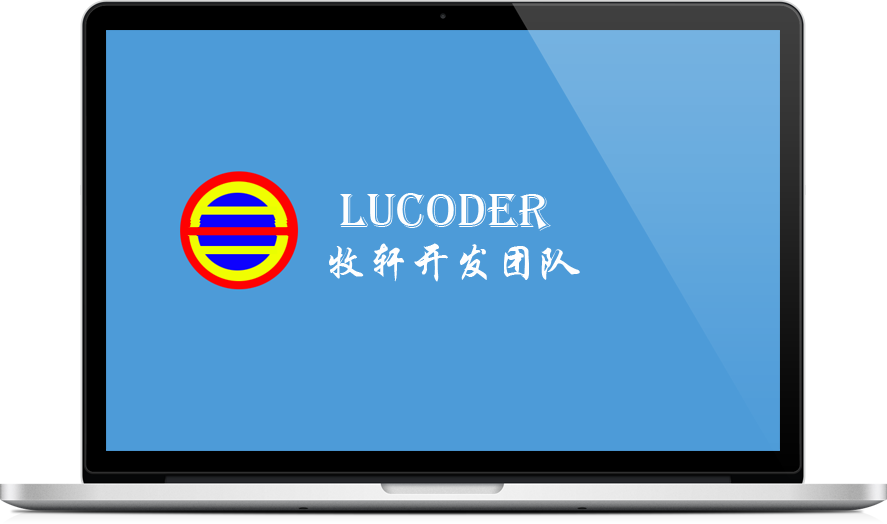
<style>
.page{position:relative;width:887px;height:524px;background:#4d9bd8}
.page>*{position:absolute;margin:0}
.t1{font:50px "Algerian";color:#fefefe}
.t2{font:43px "STXingkai";color:#fefefe;font-variant:small-caps}
</style>
<div class="page">
<p class="t1" style="left:340px;top:193px;width:211px;height:38px">Lucoder</p>
<p class="t2" style="left:329px;top:243px;width:251px;height:39px">牧轩开发团队</p>
</div>
